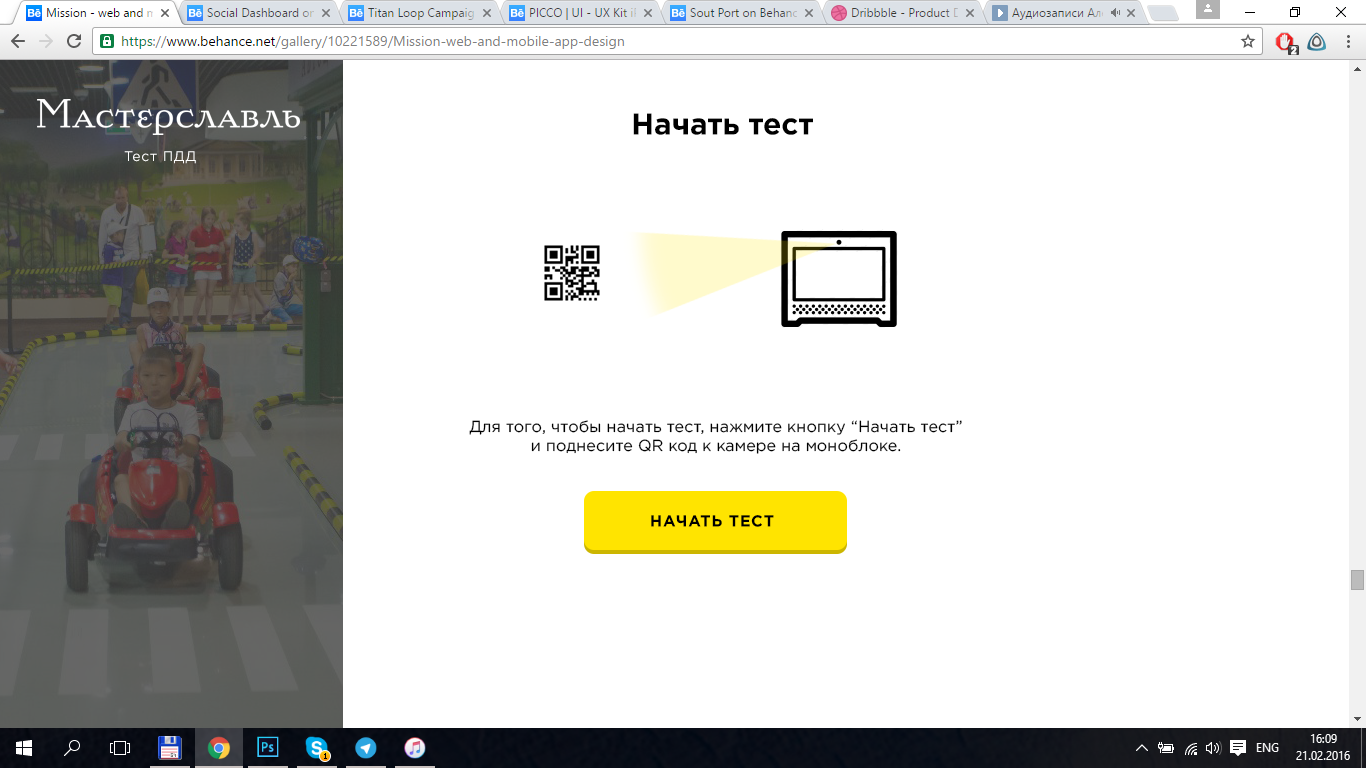
<style>
.page{position:relative;width:1366px;height:768px;background:#ffffff}
.page>*{position:absolute;margin:0}
.t1{font:30px "GothamPro-Bold";color:#000000}
.t2{font:14px "GothamPro";letter-spacing:0.05em;color:#ffffff}
.t3{font:16px "GothamPro";letter-spacing:0.01em;color:#000000}
.t4{font:16px "GothamPro-Bold";letter-spacing:0.05em;color:#000000}
</style>
<div class="page">
<p class="t1" style="left:633px;top:113px;width:180px;height:22px">Начать тест</p>
<p class="t2" style="left:124px;top:151px;width:72px;height:13px">Тест ПДД</p>
<p class="t3" style="left:469px;top:420px;width:493px;height:34px;text-align:center">Для того, чтобы начать тест, нажмите кнопку “Начать тест”<br>и поднесите QR код к камере на моноблоке.</p>
<p class="t4" style="left:651px;top:515px;width:123px;height:12px">НАЧАТЬ ТЕСТ</p>
</div>
